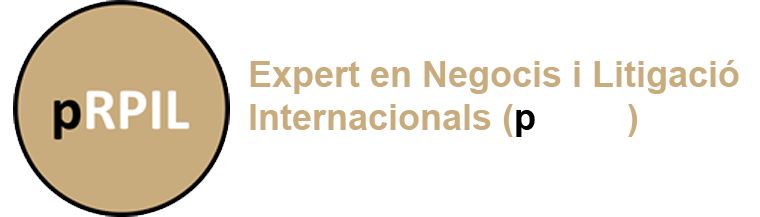
<style>
.page{position:relative;width:760px;height:217px;background:#ffffff}
.page>*{position:absolute;margin:0}
.t1{font:36px "Arial-BoldMT";color:#c9ac7d}
.t2{font:36px "Arial-BoldMT";color:#000000}
.t3{font:36px "Arial-BoldMT";color:#ffffff}
</style>
<div class="page">
<p class="t1" style="left:250px;top:60px;width:489px;height:77px">Expert en Negocis i Litigació<br>Internacionals (<span class="t2">p</span><span class="t3">RPIL </span>)</p>
</div>
